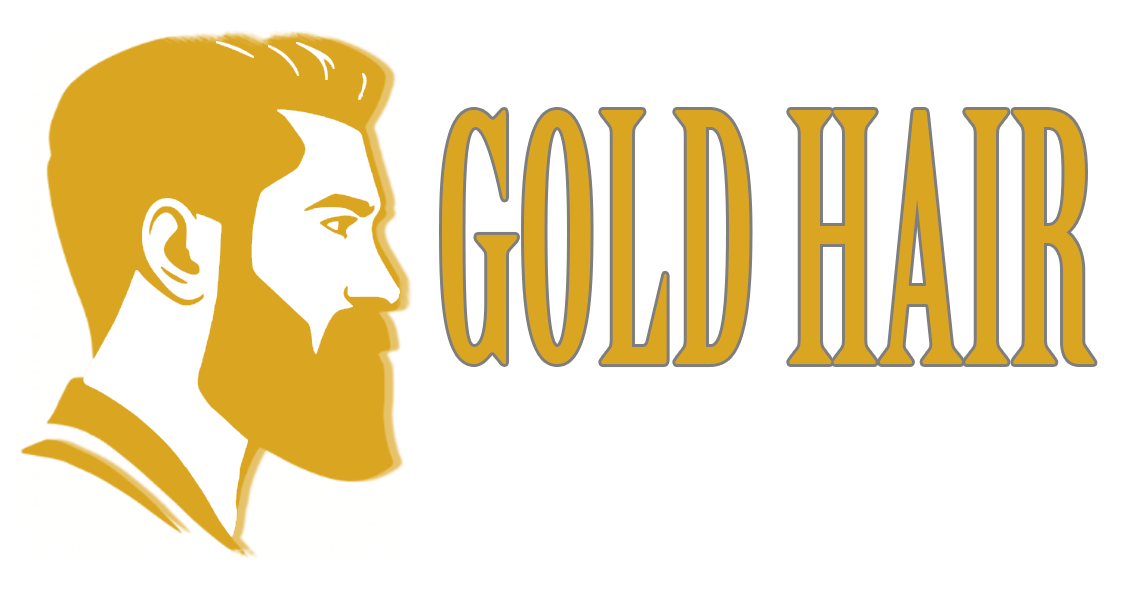
<style>
.page{position:relative;width:1134px;height:600px;background:#ffffff}
.page>*{position:absolute;margin:0}
.t1{font:338.9px "BirchStd";color:#daa520;scale:0.74 1}
</style>
<div class="page">
<p class="t1" style="left:442px;top:110px;width:653px;height:255px">GOLD HAIR</p>
</div>
